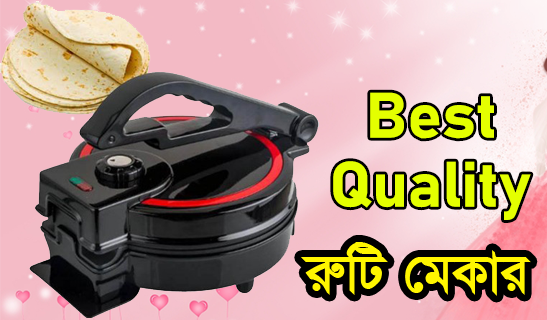
<style>
.page{position:relative;width:547px;height:320px}
.page>*{position:absolute;margin:0}
.t1{font:63px "Bahnschrift-Bold";color:#e4ff00;scale:1.03 1}
.t2{font:63.8px "SutonnyMJBold";color:#fff600}
</style>
<div class="page">
<p class="t1" style="left:370px;top:92px;width:124px;height:47px">Best</p>
<p class="t1" style="left:333px;top:161px;width:198px;height:59px">Quality</p>
<p class="t2" style="left:301px;top:242px;width:230px;height:54px">i“wU †gKvi</p>
</div>
